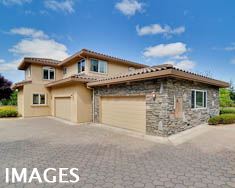
<style>
.page{position:relative;width:235px;height:188px}
.page>*{position:absolute;margin:0}
.t1{font:20px "LucidaSansUnicode";color:#ffffff;font-weight:bold}
</style>
<div class="page">
<p class="t1" style="left:5px;top:168px;width:75px;height:15px">IMAGES</p>
</div>
